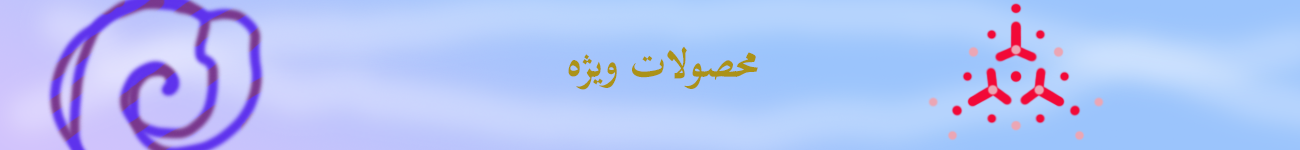
<style>
.page{position:relative;width:1300px;height:150px}
.page>*{position:absolute;margin:0}
.t1{font:50px "TraditionalArabic-Bold";color:#ab9218}
</style>
<div class="page">
<p class="t1" style="left:568px;top:46px;width:190px;height:44px">محصولات ویژه</p>
</div>
